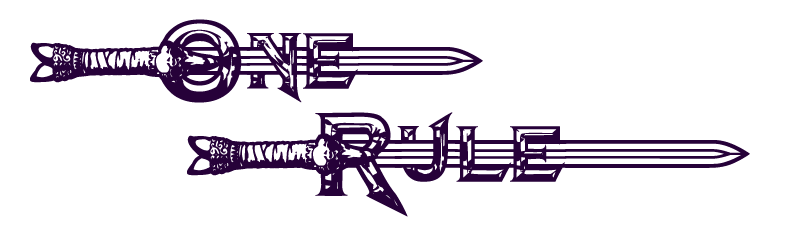
<style>
.page{position:relative;width:800px;height:250px;background:#ffffff}
.page>*{position:absolute;margin:0}
.t1{font:120px "Barbarian";color:#260139}
</style>
<div class="page">
<p class="t1" style="left:30px;top:19px;width:453px;height:84px">One.&gt;</p>
<p class="t1" style="left:187px;top:112px;width:563px;height:105px">Rule...&gt;</p>
</div>
